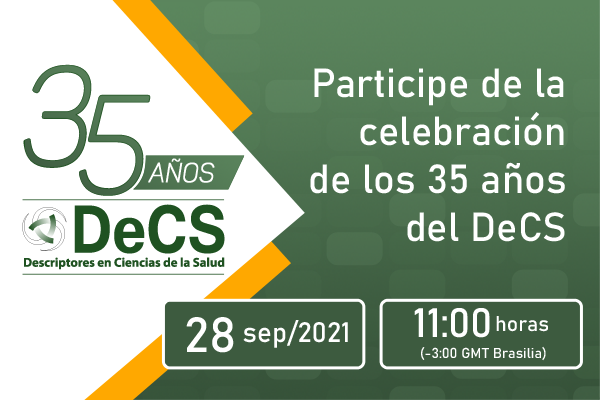
<style>
.page{position:relative;width:600px;height:400px;background:#ffffff}
.page>*{position:absolute;margin:0}
.t1{font:137px "Panton-LightitalicCaps";color:#4a6f4c;font-weight:bold;scale:0.9 1}
.t2{font:40px "Bahnschrift";color:#ffffff}
.t3{font:137px "Panton-LightitalicCaps";color:#4c714e;font-weight:bold;scale:0.9 1}
.t4{font:27px "Panton-LightitalicCaps";color:#ffffff;font-weight:bold;scale:0.9 1}
.t5{font:48.7px "Bahnschrift";color:#ffffff}
.t6{font:40.6px "Bahnschrift";color:#ffffff}
.t7{font:20.9px "Bahnschrift";color:#ffffff}
.t8{font:27.6px "Bahnschrift";color:#ffffff}
.t9{font:14.3px "Bahnschrift";color:#ffffff}
</style>
<div class="page">
<p class="t1" style="left:23px;top:64px;width:69px;height:104px">3</p>
<p class="t2" style="left:310px;top:68px;width:255px;height:174px;text-align:right">Participe de la<br>celebración<br>de los 35 años<br>del DeCS</p>
<p class="t3" style="left:79px;top:94px;width:72px;height:102px">5</p>
<p class="t4" style="left:148px;top:158px;width:67px;height:25px">años</p>
<p class="t5" style="left:186px;top:317px;width:48px;height:36px">28</p>
<p class="t6" style="left:414px;top:308px;width:76px;height:30px">11:00</p>
<p class="t7" style="left:496px;top:316px;width:52px;height:16px">horas</p>
<p class="t8" style="left:243px;top:320px;width:105px;height:28px">sep/2021</p>
<p class="t9" style="left:421px;top:346px;width:125px;height:15px">(-3:00 GMT Brasilia)</p>
</div>
